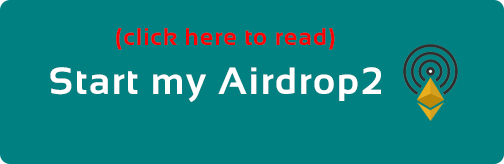
<style>
.page{position:relative;width:504px;height:164px;background:#008080}
.page>*{position:absolute;margin:0}
.t1{font:24px "Sansation-Bold";letter-spacing:0.05em;color:#ff0000}
.t2{font:38px "Sansation-Bold";letter-spacing:0.05em;color:#ffffff}
</style>
<div class="page">
<p class="t1" style="left:116px;top:28px;width:219px;height:22px">(click here to read)</p>
<p class="t2" style="left:50px;top:67px;width:331px;height:35px">Start my Airdrop2</p>
</div>
